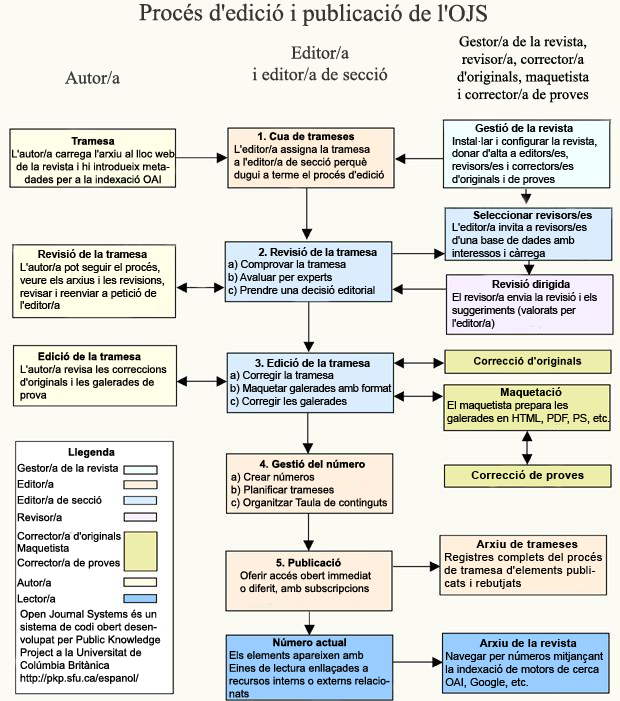
<style>
.page{position:relative;width:620px;height:701px;background:#fbfbf3}
.page>*{position:absolute;margin:0}
.t1{font:18px "TimesNewRomanPSMT";color:#3b3c3c}
.t2{font:10.7px "ArialMT";color:#000000}
.t3{font:10.7px "Arial-BoldMT";color:#000000}
.t4{font:10.7px "Arial-BoldMT";letter-spacing:-0.01em;color:#000000}
.t5{font:10.7px "ArialMT";letter-spacing:-0.01em;color:#000000}
.t6{font:10.7px "Arial-BoldMT";letter-spacing:0.01em;color:#000000}
.t7{font:10.7px "Arial-BoldMT";letter-spacing:0.025em;color:#000000}
.t8{font:10.7px/13.3px "ArialMT";color:#000000}
.t9{font:10.7px/10.7px "Arial-BoldMT";color:#000000}
.t10{font:10.7px/12px "Arial-BoldMT";color:#000000}
.t11{font:10.7px/12px "ArialMT";color:#000000}
.t12{font:10.7px/10.7px "ArialMT";color:#000000}
.t13{font:10.7px/14.7px "ArialMT";color:#000000}
.t14{font:10.7px/16px "ArialMT";color:#000000}
.t15{font:10.7px/18.7px "ArialMT";color:#000000}
.t16{font:10.7px "Arial-BoldMT";letter-spacing:0.05em;color:#000000}
.t17{font:10.7px "ArialMT";letter-spacing:0.05em;color:#000000}
.t18{font:10.7px "ArialMT";letter-spacing:0.01em;color:#000000}
</style>
<div class="page">
<p class="t1" style="left:65px;top:71px;width:55px;height:13px">Autor/a</p>
<p class="t2" style="left:452px;top:123px;width:145px;height:62px;text-align:center"><span class="t3">     <br>    Gestió de la revista<br></span>Instal·lar i configurar la revista,<br>donar d'alta a editors/es, <br>revisors/es i correctors/es <br>d'originals i de proves</p>
<p class="t2" style="left:234px;top:132px;width:150px;height:49px;text-align:center"><span class="t3">    1. Cua de trameses<br></span>L'editor/a assigna la tramesa <br>a l'editor/a de secció perquè <br>dugui a terme el procés d'edició</p>
<p class="t2" style="left:452px;top:211px;width:140px;height:48px;text-align:center"><span class="t3"> Seleccionar revisors/es<br></span>L'editor/a invita a revisors/es d'una base de dades amb interessos i càrrega</p>
<p class="t2" style="left:20px;top:249px;width:144px;height:60px"><span class="t3">      Revisió de la tramesa<br></span>L'autor/a pot seguir el procés, veure els arxius i les revisions, revisar i reenviar a petició de l'editor/a</p>
<p class="t2" style="left:228px;top:247px;width:149px;height:49px;text-align:center"><span class="t4">     2. Revisió de la tramesa<br></span>a) Comprovar la tramesa<br>b) Avaluar per experts<br>c) Prendre una decisió editorial</p>
<p class="t5" style="left:452px;top:279px;width:145px;height:50px;text-align:center"><span class="t4">Revisió dirigida<br></span>El revisor/a envia la revisió i els suggeriments (valorats per l'editor/a)</p>
<p class="t2" style="left:20px;top:352px;width:147px;height:49px"><span class="t3">      Edició de la tramesa<br></span>L'autor/a revisa les correccions d'originals i les galerades de prova</p>
<p class="t5" style="left:230px;top:358px;width:162px;height:49px;text-align:center"><span class="t3">3. Edició de la tramesa<br></span><span class="t2">a) Corregir la tramesa<br>b) </span>Maquetar galerades amb format<br><span class="t2">c) Corregir les galerades</span></p>
<p class="t6" style="left:474px;top:357px;width:108px;height:10px">Correcció d'originals</p>
<p class="t2" style="left:447px;top:387px;width:163px;height:37px;text-align:center"><span class="t7">Maquetació<br></span>El maquetista prepara les galerades en HTML, PDF, PS, etc.</p>
<p class="t8" style="left:17px;top:448px;width:104px;height:155px"><span class="t3">     <br></span><span class="t9">Lle</span><span class="t10">genda<br></span><span class="t11">Gestor/a d</span><span class="t12">e la revista<br></span>E<span class="t13">ditor/</span><span class="t14">a<br>Editor/a d</span><span class="t13">e secció<br>Revisor/a<br></span><span class="t15">Corre</span>ctor/a d'originals<br>Maquetist<span class="t13">a<br>Corrector/a de proves<br>A</span><span class="t14">utor/a<br>Lector</span><span class="t13">/a</span></p>
<p class="t2" style="left:231px;top:459px;width:156px;height:50px;text-align:center"><span class="t3">4. Gestió del número<br></span>a) Crear números<br>b) Planificar trameses<br>c) Organitzar Taula de continguts</p>
<p class="t16" style="left:471px;top:470px;width:113px;height:11px">Correcció de proves</p>
<p class="t17" style="left:444px;top:540px;width:158px;height:49px;text-align:center"><span class="t16">Arxiu de trameses<br></span>Registres complets del procés de tramesa d'elements publicats i rebutjats</p>
<p class="t2" style="left:240px;top:558px;width:131px;height:37px;text-align:center"><span class="t3">5. Publicació<br></span>Oferir accés obert immediat o diferit, amb subscripcions</p>
<p class="t2" style="left:20px;top:609px;width:141px;height:75px">Open Journal Systems és un sistema de codi obert desenvolupat per Public Knowledge Project a la Universitat de Colúmbia Britànica http://pkp.sfu.ca/espanol/</p>
<p class="t2" style="left:229px;top:638px;width:161px;height:60px;text-align:center"><span class="t3">Número actual<br></span>Els elements apareixen amb Eines de lectura enllaçades a recursos interns o externs relacionats</p>
<p class="t18" style="left:445px;top:639px;width:158px;height:49px;text-align:center"><span class="t7">Arxiu de la revista<br></span>Navegar per números mitjançant la indexació de motors de cerca OAI, Google, etc.</p>
</div>
